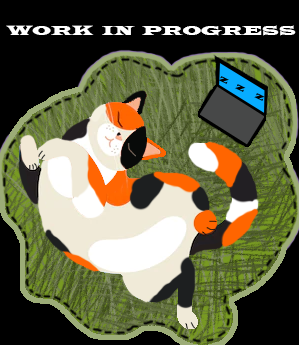
<style>
.page{position:relative;width:299px;height:345px;background:#000000}
.page>*{position:absolute;margin:0}
.t1{font:14px "LatinWide";color:#ffffff}
</style>
<div class="page">
<p class="t1" style="left:6px;top:25px;width:290px;height:11px">WORK  IN  PROGRESS</p>
</div>
